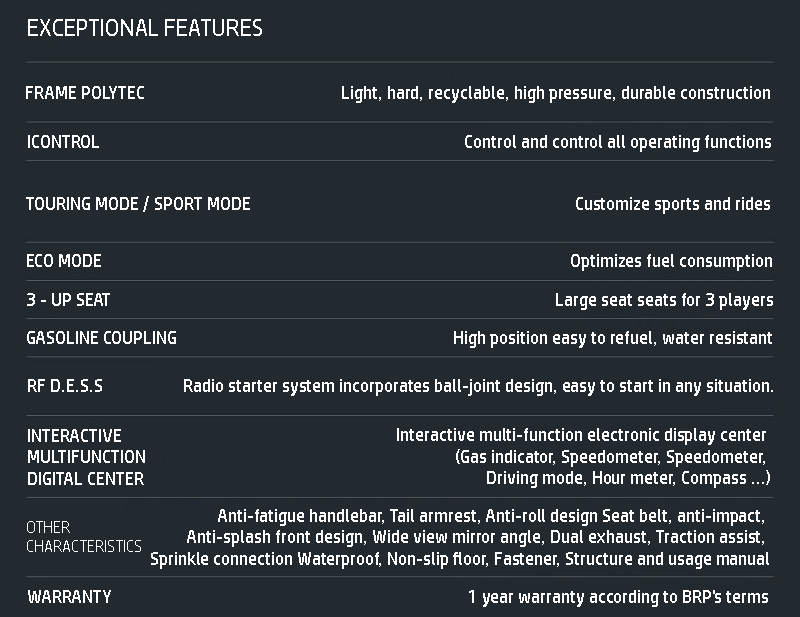
<style>
.page{position:relative;width:800px;height:617px;background:#22292f}
.page>*{position:absolute;margin:0}
.t1{font:24px "HPSimplified-Regular";color:#ffffff}
.t2{font:18px "HPSimplified-Regular";color:#ffffff}
.t3{font:16px "HPSimplified-Regular";color:#ffffff}
</style>
<div class="page">
<p class="t1" style="left:28px;top:19px;width:234px;height:17px">EXCEPTIONAL FEATURES</p>
<p class="t2" style="left:26px;top:86px;width:744px;height:17px">FRAME POLYTEC                                                 Light, hard, recyclable, high pressure, durable construction</p>
<p class="t2" style="left:28px;top:135px;width:743px;height:17px">ICONTROL                                                                                           Control and control all operating functions</p>
<p class="t2" style="left:26px;top:196px;width:744px;height:18px">TOURING MODE / SPORT MODE                                                                                 Customize sports and rides</p>
<p class="t2" style="left:27px;top:254px;width:745px;height:17px">ECO MODE                                                                                                                     Optimizes fuel consumption</p>
<p class="t2" style="left:27px;top:293px;width:746px;height:17px">3 - UP SEAT                                                                                                               Large seat seats for 3 players</p>
<p class="t2" style="left:27px;top:331px;width:745px;height:17px">GASOLINE COUPLING                                                                     High position easy to refuel, water resistant</p>
<p class="t2" style="left:28px;top:379px;width:745px;height:17px">RF D.E.S.S                    Radio starter system incorporates ball-joint design, easy to start in any situation.</p>
<p class="t2" style="left:28px;top:429px;width:117px;height:56px">INTERACTIVE <br>MULTIFUNCTION <br>DIGITAL CENTER</p>
<p class="t2" style="left:397px;top:428px;width:373px;height:60px;text-align:right">Interactive multi-function electronic display center <br>(Gas indicator, Speedometer, Speedometer, <br>Driving mode, Hour meter, Compass ...)</p>
<p class="t2" style="left:151px;top:509px;width:618px;height:60px;text-align:right">Anti-fatigue handlebar, Tail armrest, Anti-roll design Seat belt, anti-impact, <br>Anti-splash front design, Wide view mirror angle, Dual exhaust, Traction assist, <br>Sprinkle connection Waterproof, Non-slip floor, Fastener, Structure and usage manual</p>
<p class="t3" style="left:27px;top:521px;width:114px;height:31px">OTHER <br>CHARACTERISTICS</p>
<p class="t2" style="left:28px;top:590px;width:740px;height:17px">WARRANTY                                                                                         1 year warranty according to BRP's terms</p>
</div>
